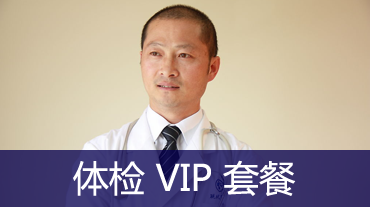
<style>
.page{position:relative;width:370px;height:207px}
.page>*{position:absolute;margin:0}
.t1{font:36px "MicrosoftYaHei";color:#ffffff}
</style>
<div class="page">
<p class="t1" style="left:73px;top:160px;width:223px;height:37px">体检 VIP 套餐</p>
</div>
